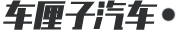
<style>
.page{position:relative;width:180px;height:30px;background:#ffffff}
.page>*{position:absolute;margin:0}
.t1{font:30.3px "REEJI-JinGang-ExtraBoldGB1.0";color:#2e3032;font-style:italic}
</style>
<div class="page">
<p class="t1" style="left:3px;top:0px;width:155px;height:30px">车厘子汽车</p>
</div>
